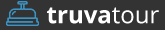
<style>
.page{position:relative;width:165px;height:30px;background:#333333}
.page>*{position:absolute;margin:0}
.t1{font:24px "OpenSans-Bold";color:#ffffff}
.t2{font:24px "OpenSans";color:#ffffff}
</style>
<div class="page">
<p class="t1" style="left:47px;top:7px;width:112px;height:17px">truva<span class="t2">tour</span></p>
</div>
